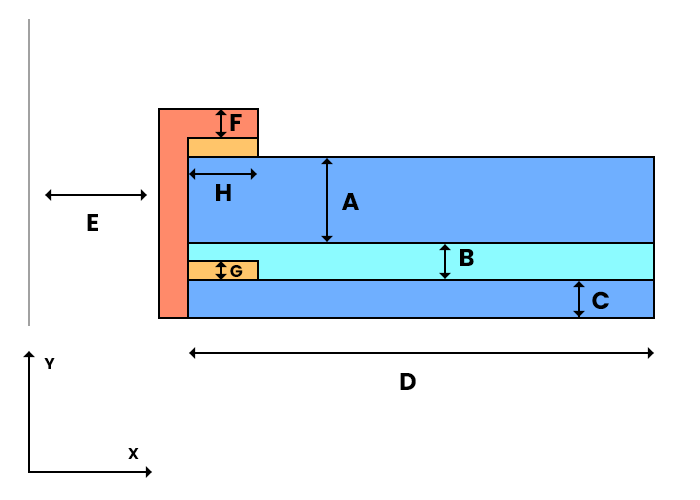
<style>
.page{position:relative;width:700px;height:500px;background:#ffffff}
.page>*{position:absolute;margin:0}
.t1{font:24.3px "Poppins-Bold";letter-spacing:-0.03em;color:#000000}
.t2{font:17px "Poppins-Bold";letter-spacing:-0.03em;color:#000000}
.t3{font:15.7px "Poppins-Bold";letter-spacing:-0.03em;color:#000000}
</style>
<div class="page">
<p class="t1" style="left:230px;top:114px;width:12px;height:17px">F</p>
<p class="t1" style="left:216px;top:184px;width:15px;height:17px">H</p>
<p class="t1" style="left:342px;top:193px;width:17px;height:17px">A</p>
<p class="t1" style="left:87px;top:214px;width:11px;height:17px">E</p>
<p class="t1" style="left:460px;top:249px;width:14px;height:17px">B</p>
<p class="t2" style="left:230px;top:265px;width:13px;height:12px">G</p>
<p class="t1" style="left:592px;top:291px;width:17px;height:18px">C</p>
<p class="t3" style="left:44px;top:358px;width:11px;height:11px">Y</p>
<p class="t1" style="left:400px;top:373px;width:16px;height:17px">D</p>
<p class="t3" style="left:128px;top:448px;width:11px;height:11px">X</p>
</div>
